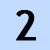
<style>
.page{position:relative;width:50px;height:50px;background:#c2dbff}
.page>*{position:absolute;margin:0}
.t1{font:41.7px "TrebuchetMS";color:#000000;font-weight:bold}
</style>
<div class="page">
<p class="t1" style="left:16px;top:10px;width:20px;height:31px">2</p>
</div>
